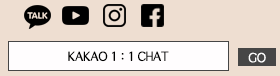
<style>
.page{position:relative;width:280px;height:76px;background:#eeded1}
.page>*{position:absolute;margin:0}
.t1{font:12px "H2gprM";letter-spacing:-0.075em;color:#000000;font-weight:bold}
.t2{font:12px "H2gprM";letter-spacing:-0.075em;color:#ffffff;font-weight:bold}
</style>
<div class="page">
<p class="t1" style="left:68px;top:51px;width:101px;height:11px">KAKAO 1 : 1 CHAT</p>
<p class="t2" style="left:248px;top:52px;width:18px;height:11px">GO</p>
</div>
